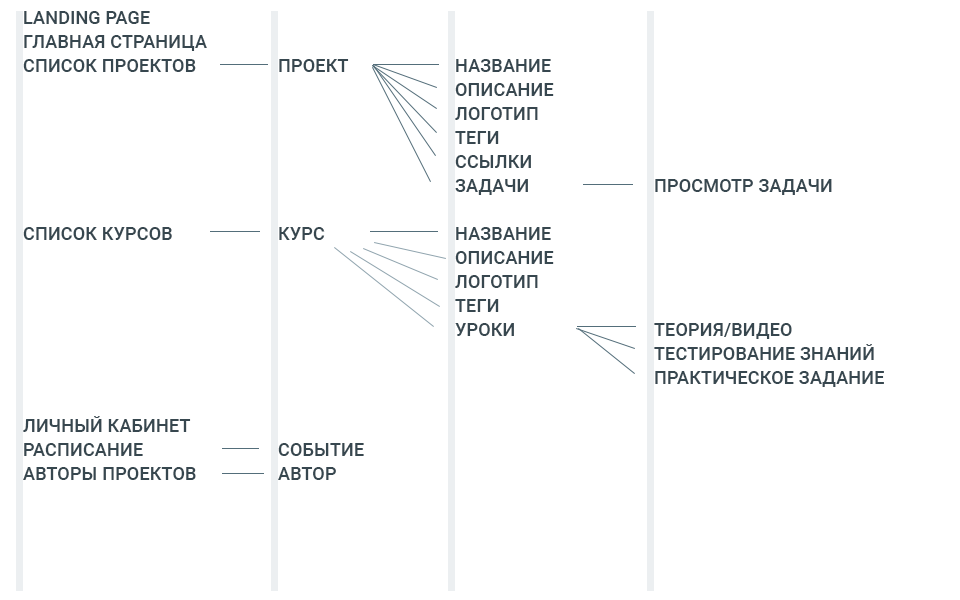
<style>
.page{position:relative;width:960px;height:600px;background:#ffffff}
.page>*{position:absolute;margin:0}
.t1{font:18px/24px "Roboto-Medium";letter-spacing:0.01em;color:#37474f;text-transform:uppercase}
</style>
<div class="page">
<p class="t1" style="left:23px;top:11px;width:184px;height:469px">Landing page<br>главная страница<br>список проектов<br><br><br><br><br><br><br>список курсов<br><br><br><br><br><br><br><br>личный кабинет<br>расписание<br>авторы проектов</p>
<p class="t1" style="left:278px;top:59px;width:86px;height:421px">проект<br><br><br><br><br><br><br>курс<br><br><br><br><br><br><br><br><br>событие<br>автор</p>
<p class="t1" style="left:455px;top:59px;width:99px;height:277px">название<br>описание<br>логотип<br>теги<br>ссылки<br>задачи<br><br>название<br>описание<br>логотип<br>теги<br>уроки</p>
<p class="t1" style="left:654px;top:179px;width:230px;height:208px">просмотр задачи<br><br><br><br><br><br>теория/видео<br>тестирование знаний<br>практическое задание</p>
</div>
